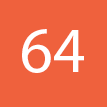
<style>
.page{position:relative;width:107px;height:107px;background:#ef613d}
.page>*{position:absolute;margin:0}
.t1{font:64px "MyriadPro-Regular";color:#ffffff}
</style>
<div class="page">
<p class="t1" style="left:22px;top:29px;width:62px;height:44px">64</p>
</div>
